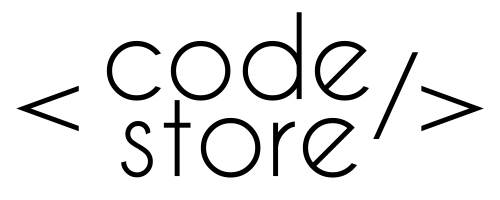
<style>
.page{position:relative;width:500px;height:200px;background:#ffffff}
.page>*{position:absolute;margin:0}
.t1{font:111.4px "CaviarDreams";color:#000000}
</style>
<div class="page">
<p class="t1" style="left:106px;top:12px;width:263px;height:89px">code</p>
<p class="t1" style="left:373px;top:52px;width:111px;height:87px">/&gt;</p>
<p class="t1" style="left:16px;top:85px;width:63px;height:47px">&lt;</p>
<p class="t1" style="left:121px;top:100px;width:236px;height:78px">store</p>
</div>
